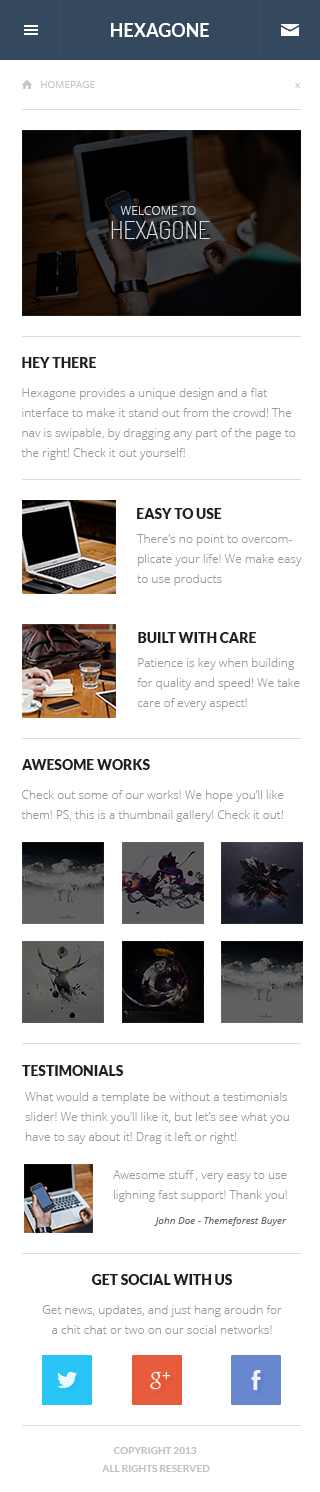
<style>
.page{position:relative;width:320px;height:1492px;background:#ffffff}
.page>*{position:absolute;margin:0}
.t1{font:18px "Lato-Bold";color:#ffffff}
.t2{font:10px "OpenSans";color:#c6c6c6}
.t3{font:10px "OpenSans";color:#dcdcdc}
.t4{font:12px/24px "OpenSans-Light";color:#dcdcdc}
.t5{font:24px/24px "Dosis-ExtraLight";color:#dcdcdc}
.t6{font:14px "Lato-Black";color:#1f1f1f}
.t7{font:12px/20px "OpenSans-Light";color:#9a9a9a}
.t8{font:10px "OpenSans-Italic";color:#676767}
.t9{font:10px/18px "Lato-Bold";color:#c2c2c2}
</style>
<div class="page">
<p class="t1" style="left:111px;top:23px;width:98px;height:14px">HEXAGONE</p>
<p class="t2" style="left:41px;top:81px;width:54px;height:7px">HOMEPAGE</p>
<p class="t3" style="left:295px;top:83px;width:5px;height:5px">x</p>
<p class="t4" style="left:111px;top:206px;width:99px;height:33px;text-align:center">WELCOME TO <br><span class="t5">HEXAGONE</span></p>
<p class="t6" style="left:22px;top:357px;width:74px;height:11px">HEY THERE</p>
<p class="t7" style="left:21px;top:388px;width:275px;height:72px">Hexagone provides a unique design and a flat interface to make it stand out from the crowd! The nav is swipable, by dragging any part of the page to the right! Check it out yourself!</p>
<p class="t6" style="left:137px;top:508px;width:85px;height:11px">EASY TO USE</p>
<p class="t7" style="left:137px;top:534px;width:165px;height:52px">There’s no point to overcomplicate your life! We make easy to use products</p>
<p class="t6" style="left:138px;top:632px;width:118px;height:11px">BUILT WITH CARE</p>
<p class="t7" style="left:137px;top:658px;width:163px;height:52px">Patience is key when building for quality and speed! We take care of every aspect!</p>
<p class="t6" style="left:22px;top:759px;width:128px;height:11px">AWESOME WORKS</p>
<p class="t7" style="left:21px;top:790px;width:263px;height:32px">Check out some of our works! We hope you’ll like them! PS, this is a thumbnail gallery! Check it out!</p>
<p class="t6" style="left:22px;top:1065px;width:102px;height:11px">TESTIMONIALS</p>
<p class="t7" style="left:25px;top:1092px;width:264px;height:52px">What would a template be without a testimonials slider! We think you’ll like it, but let’s see what you have to say about it! Drag it left or right!</p>
<p class="t7" style="left:113px;top:1170px;width:174px;height:32px">Awesome stuff , very easy to use <br>lighning fast support! Thank you!</p>
<p class="t8" style="left:154px;top:1217px;width:133px;height:9px">John Doe - Themeforest Buyer</p>
<p class="t6" style="left:91px;top:1274px;width:142px;height:11px">GET SOCIAL WITH US</p>
<p class="t7" style="left:42px;top:1305px;width:240px;height:29px;text-align:center">Get news, updates, and just hang aroudn for<br>a chit chat or two on our social networks!</p>
<p class="t9" style="left:102px;top:1447px;width:108px;height:25px;text-align:center">COPYRIGHT 2013<br> ALL RIGHTS RESERVED</p>
</div>
